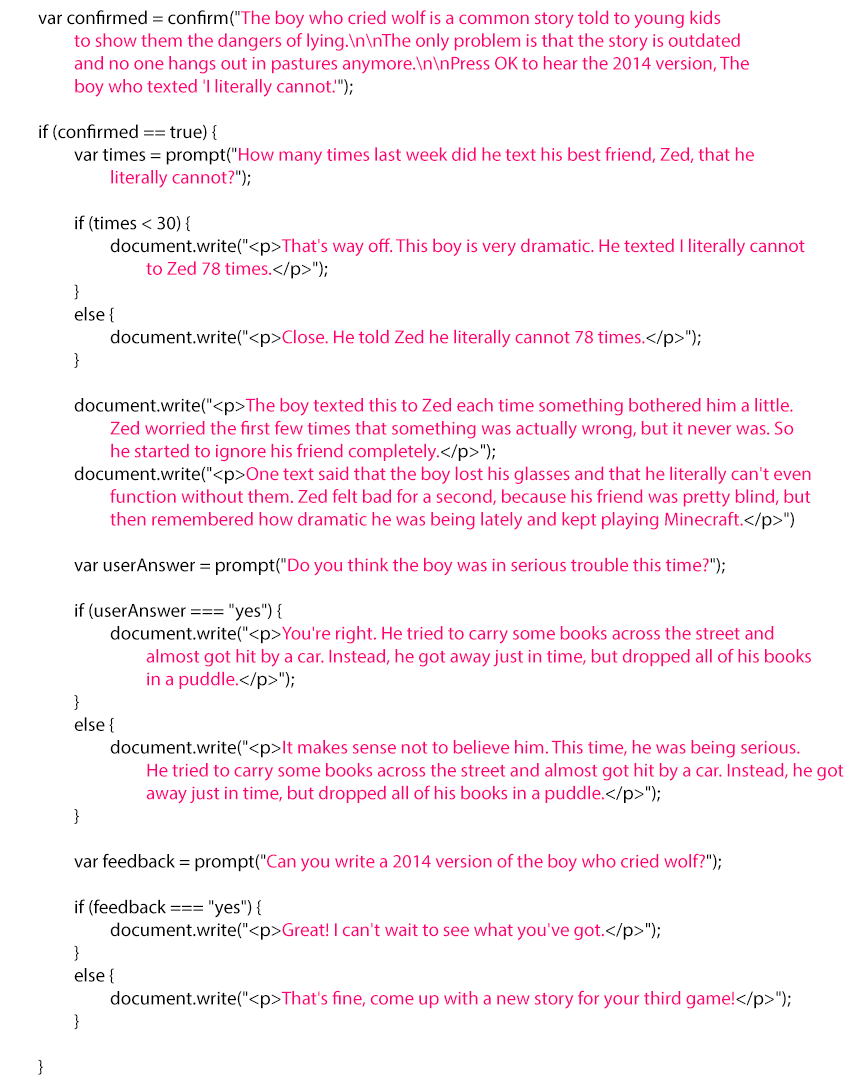
<style>
.page{position:relative;width:862px;height:1080px;background:#ffffff}
.page>*{position:absolute;margin:0}
.t1{font:19px "MyriadPro-Regular";color:#ff0078}
.t2{font:19px "MyriadPro-Regular";color:#000000}
</style>
<div class="page">
<p class="t1" style="left:38px;top:10px;width:806px;height:1065px"><span class="t2"> var confirmed = confirm("</span>The boy who cried wolf is a common story told to young kids <br>  to show them the dangers of lying.\n\nThe only problem is that the story is outdated <br>  and no one hangs out in pastures anymore.\n\nPress OK to hear the 2014 version, The <br>  boy who texted 'I literally cannot.'<span class="t2">");<br><br> if (confirmed == true) {<br>  var times = prompt("</span>How many times last week did he text his best friend, Zed, that he<br>    literally cannot?<span class="t2">");<br><br>  if (times &lt; 30) {<br>   document.write("&lt;p&gt;</span>That's way off. This boy is very dramatic. He texted I literally cannot <br>    to Zed 78 times.<span class="t2">&lt;/p&gt;");<br>  }<br>  else {<br>   document.write("&lt;p&gt;</span>Close. He told Zed he literally cannot 78 times.<span class="t2">&lt;/p&gt;");<br>  }<br><br>  document.write("&lt;p&gt;</span>The boy texted this to Zed each time something bothered him a little. <br>   Zed worried the first few times that something was actually wrong, but it never was. So <br>   he started to ignore his friend completely.<span class="t2">&lt;/p&gt;");<br>  document.write("&lt;p&gt;</span>One text said that the boy lost his glasses and that he literally can't even<br>   function without them. Zed felt bad for a second, because his friend was pretty blind, but <br>   then remembered how dramatic he was being lately and kept playing Minecraft.<span class="t2">&lt;/p&gt;")<br><br>             var userAnswer = prompt("</span>Do you think the boy was in serious trouble this time?<span class="t2">");<br><br>            if (userAnswer === "yes") {<br>                  document.write("&lt;p&gt;</span>You're right. He tried to carry some books across the street and <br>    almost got hit by a car. Instead, he got away just in time, but dropped all of his books<br>    in a puddle.<span class="t2">&lt;/p&gt;");<br>             }                <br>            else {<br>                  document.write("&lt;p&gt;</span>It makes sense not to believe him. This time, he was being serious. <br>    He tried to carry some books across the street and almost got hit by a car. Instead, he got <br>    away just in time, but dropped all of his books in a puddle.<span class="t2">&lt;/p&gt;");<br>             }<br>                    <br>             var feedback = prompt("</span>Can you write a 2014 version of the boy who cried wolf?<span class="t2">");<br><br>             if (feedback === "yes") {<br>                  document.write("&lt;p&gt;</span>Great! I can't wait to see what you've got.<span class="t2">&lt;/p&gt;");<br>             }<br>             else {<br>   document.write("&lt;p&gt;</span>That's fine, come up with a new story for your third game!<span class="t2">&lt;/p&gt;");        <br>             }<br>            <br> }</span></p>
</div>
